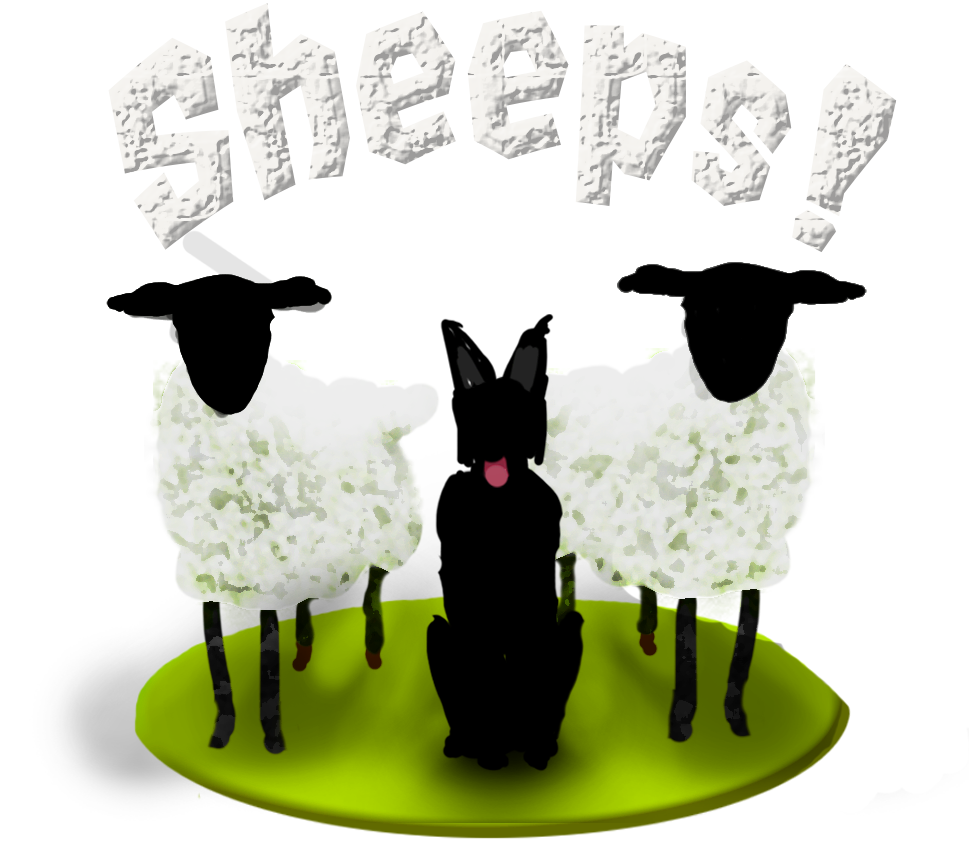
<style>
.page{position:relative;width:969px;height:853px;background:#ffffff}
.page>*{position:absolute;margin:0}
.t1{font:237.3px "Rocks__G";scale:0.77 1}
</style>
<div class="page">
<p class="t1" style="left:108px;top:3px;width:789px;height:250px;rotate:1deg">Sheeps!</p>
</div>
